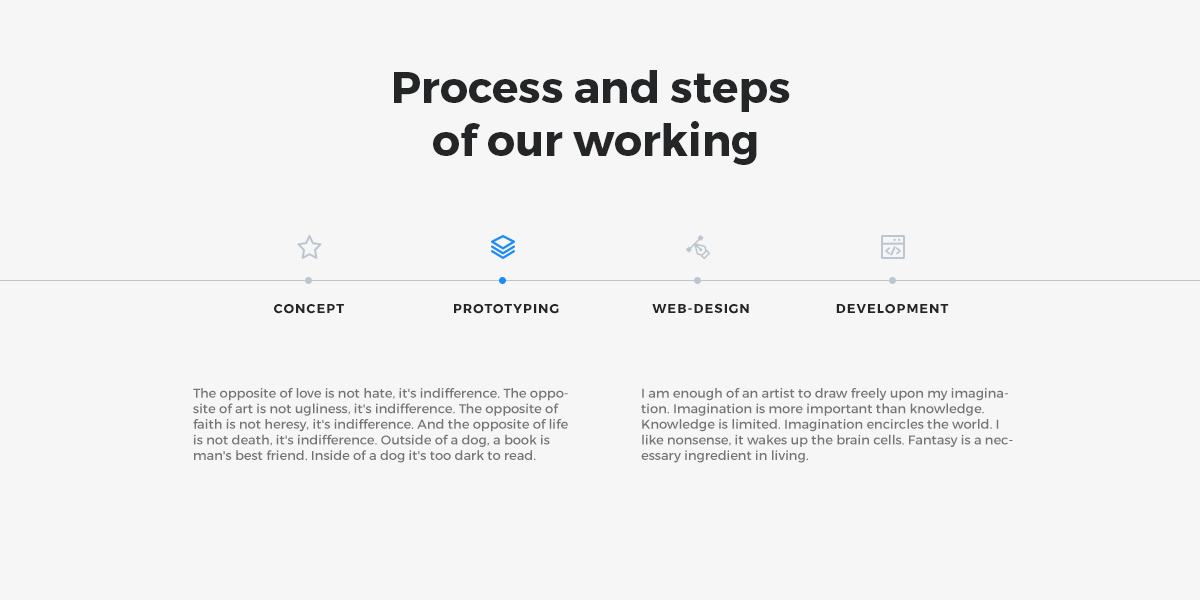
<style>
.page{position:relative;width:1200px;height:600px;background:#f6f6f6}
.page>*{position:absolute;margin:0}
.t1{font:44px "Montserrat-Bold";color:#242526}
.t2{font:13px "Montserrat-Bold";letter-spacing:0.08em;color:#242526;text-transform:uppercase}
.t3{font:13px "Montserrat-Regular";color:#747474}
</style>
<div class="page">
<p class="t1" style="left:394px;top:70px;width:396px;height:95px;text-align:center">Process and steps <br>of our working</p>
<p class="t2" style="left:274px;top:304px;width:70px;height:10px">concept</p>
<p class="t2" style="left:454px;top:304px;width:105px;height:10px">prototyping</p>
<p class="t2" style="left:652px;top:303px;width:97px;height:11px">web-design</p>
<p class="t2" style="left:836px;top:304px;width:113px;height:10px">development</p>
<p class="t3" style="left:193px;top:388px;width:375px;height:75px">The opposite of love is not hate, it's indifference. The opposite of art is not ugliness, it's indifference. The opposite of faith is not heresy, it's indifference. And the opposite of life is not death, it's indifference. Outside of a dog, a book is man's best friend. Inside of a dog it's too dark to read.</p>
<p class="t3" style="left:641px;top:388px;width:372px;height:75px">I am enough of an artist to draw freely upon my imagination. Imagination is more important than knowledge. Knowledge is limited. Imagination encircles the world. I like nonsense, it wakes up the brain cells. Fantasy is a necessary ingredient in living.</p>
</div>
